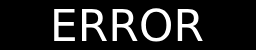
<style>
.page{position:relative;width:256px;height:50px;background:#000000}
.page>*{position:absolute;margin:0}
.t1{font:44px "DejaVuSans";color:#ffffff}
</style>
<div class="page">
<p class="t1" style="left:54px;top:8px;width:149px;height:34px">ERROR</p>
</div>
